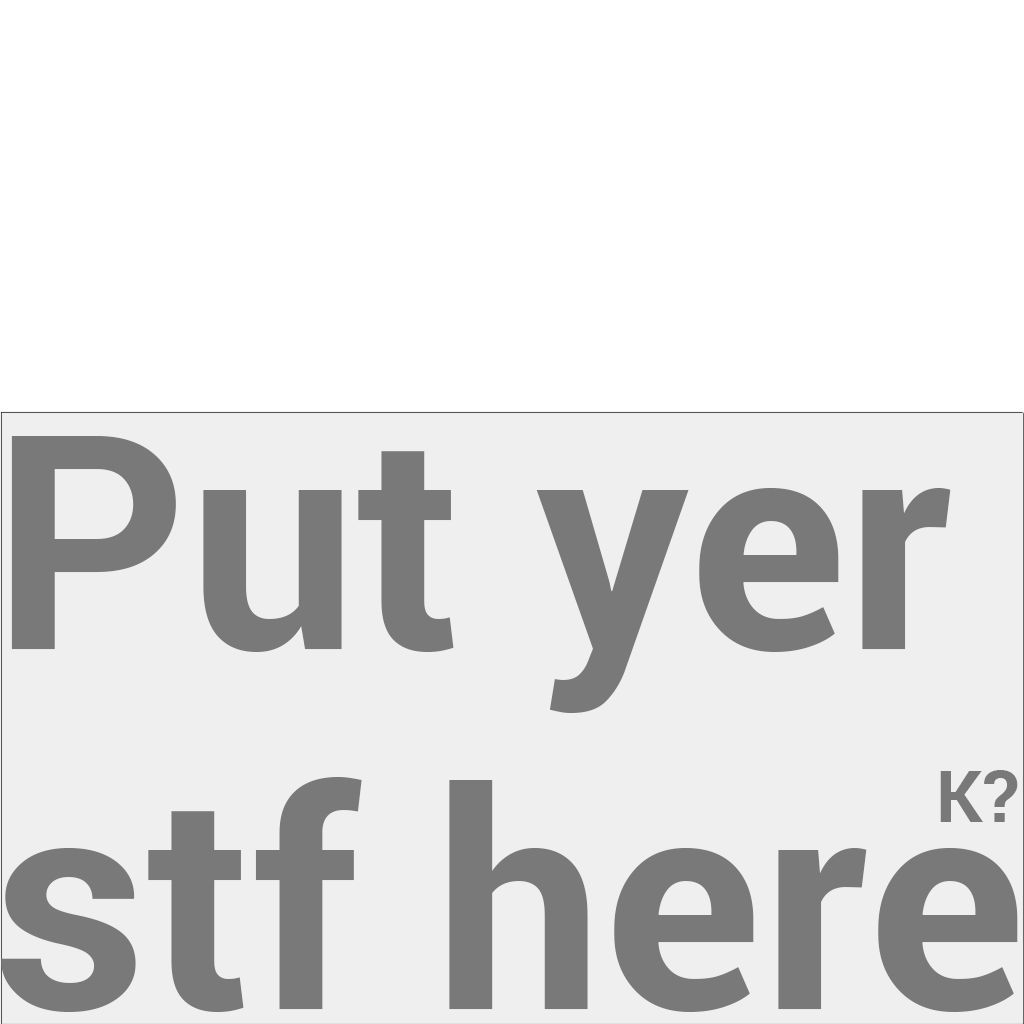
<style>
.page{position:relative;width:1024px;height:1024px;background:#efefef}
.page>*{position:absolute;margin:0}
.t1{font:300px "Roboto-Bold";color:#797979}
.t2{font:72px "Roboto-Bold";color:#797979}
</style>
<div class="page">
<p class="t1" style="left:1px;top:436px;width:1017px;height:576px">Put yer<br>stf here</p>
<p class="t2" style="left:940px;top:770px;width:78px;height:52px">K?</p>
</div>
